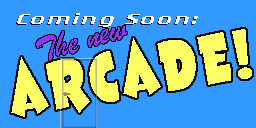
<style>
.page{position:relative;width:256px;height:128px;background:#3399ff}
.page>*{position:absolute;margin:0}
.t1{font:14.9px "RogueSansExt-LightIt";letter-spacing:0.1em;color:#ffffff;scale:1.71 1}
.t2{font:66.2px "CCThatsAllFolks-Bold";letter-spacing:0.08em;color:#ffff66;scale:0.72 1}
.t3{font:36px "BrushScriptMT";letter-spacing:-0.01em;color:#8f37ff}
</style>
<div class="page">
<p class="t1" style="left:17px;top:13px;width:181px;height:14px">Coming Soon:</p>
<p class="t2" style="left:11px;top:29px;width:241px;height:88px;rotate:-9deg">aRCaDE!</p>
<p class="t3" style="left:36px;top:26px;width:91px;height:36px;rotate:-16deg">The new</p>
</div>
